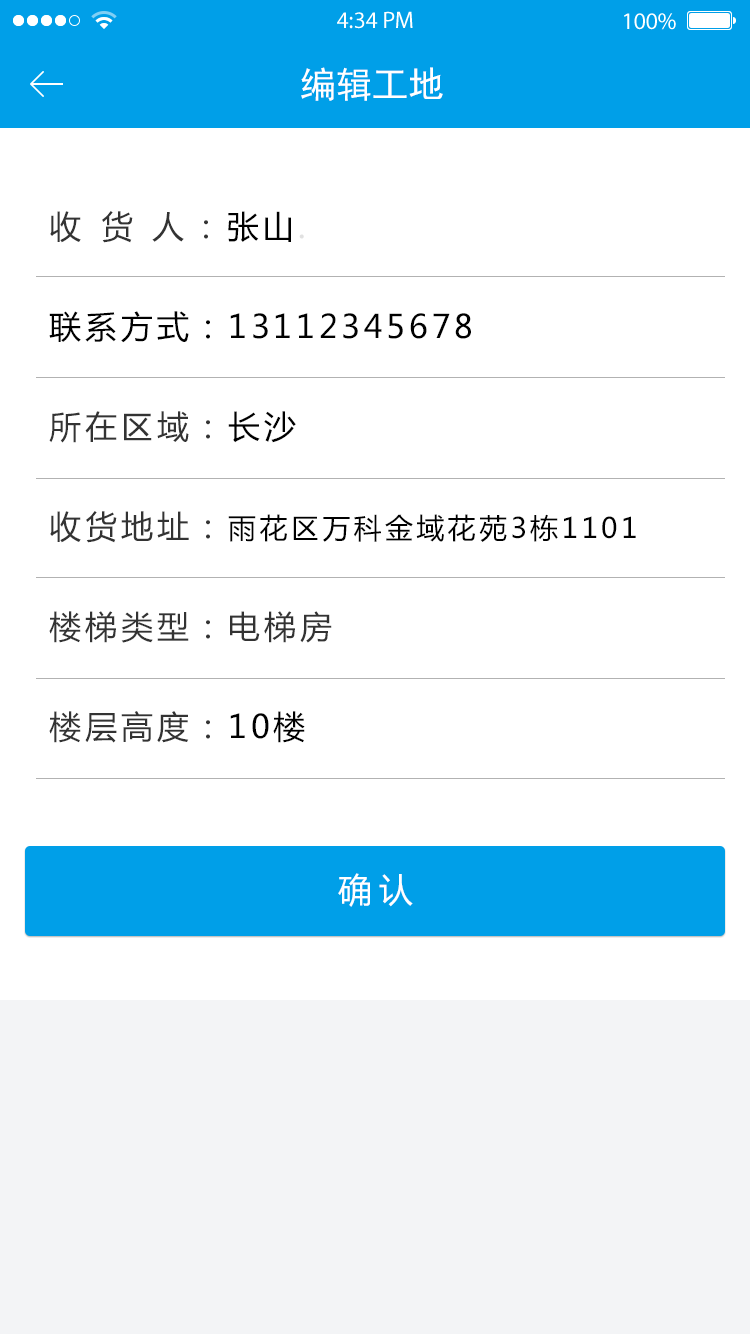
<style>
.page{position:relative;width:750px;height:1334px;background:#ffffff}
.page>*{position:absolute;margin:0}
.t1{font:36px "SimHei";color:#ffffff}
.t2{font:32px/100px "MicrosoftYaHei";letter-spacing:0.12em;color:#000000}
.t3{font:32px/100px "MicrosoftYaHei";letter-spacing:0.16em;color:#333333}
.t4{font:32px/100px "MicrosoftYaHei";letter-spacing:0.12em;color:#e1e1e1}
.t5{font:32px/100px "MicrosoftYaHei";letter-spacing:0.12em;color:#333333}
.t6{font:28px/100px "MicrosoftYaHei";letter-spacing:0.12em;color:#000000}
.t7{font:34px "MicrosoftYaHei";letter-spacing:0.22em;color:#ffffff}
</style>
<div class="page">
<p class="t1" style="left:301px;top:67px;width:142px;height:34px">编辑工地</p>
<p class="t2" style="left:49px;top:211px;width:587px;height:532px"><span class="t3">收 货 人：</span>张山<span class="t4">.   <br></span>联系方式：13112345678                 <br><span class="t5">所在区域：</span>长沙<br><span class="t5">收货地址：</span><span class="t6">雨花区万科金域花苑3栋1101<br></span><span class="t5">楼梯类型：电梯房  <br>楼层高度：</span>10楼</p>
<p class="t7" style="left:338px;top:873px;width:75px;height:34px">确认</p>
</div>
